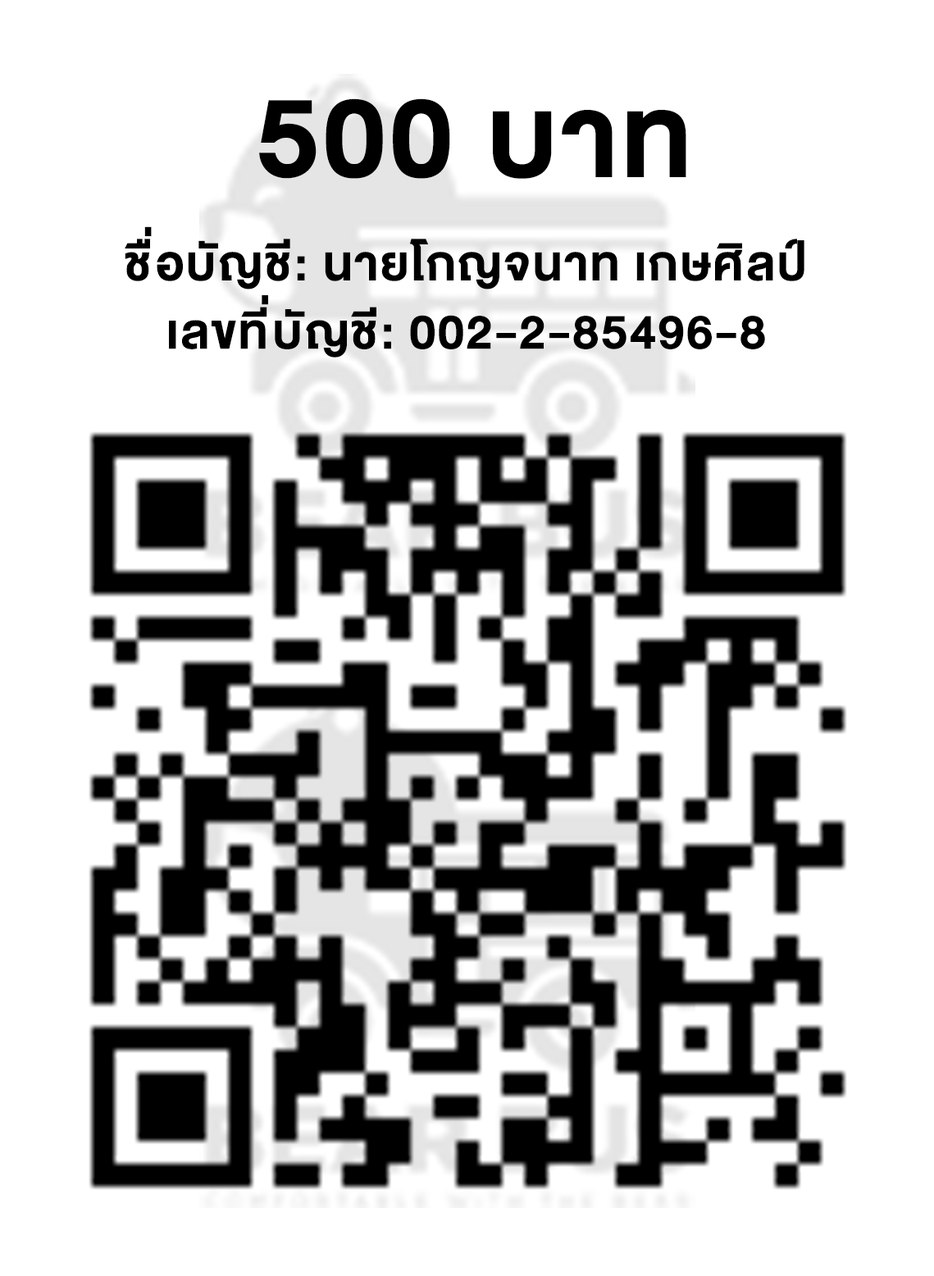
<style>
.page{position:relative;width:934px;height:1276px;background:#ffffff}
.page>*{position:absolute;margin:0}
.t1{font:160.4px "DBHelvethaicaX-75Bd";letter-spacing:0.02em;color:#000000}
.t2{font:68.4px "DBHelvethaicaX-75Bd";letter-spacing:0.02em;color:#000000}
</style>
<div class="page">
<p class="t1" style="left:259px;top:98px;width:428px;height:81px">500 บาท</p>
<p class="t2" style="left:125px;top:226px;width:680px;height:64px">ชื่อบัญชี: นายโกญจนาท เกษศิลป์</p>
<p class="t2" style="left:169px;top:295px;width:596px;height:63px">เลขที่บัญชี: 002-2-85496-8</p>
</div>
